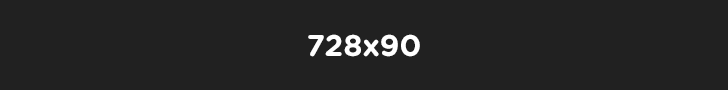
<style>
.page{position:relative;width:728px;height:90px;background:#212121}
.page>*{position:absolute;margin:0}
.t1{font:30px "GothamRounded-Bold";color:#ffffff}
</style>
<div class="page">
<p class="t1" style="left:308px;top:34px;width:112px;height:23px">728x90</p>
</div>
